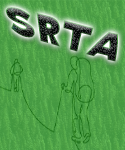
<style>
.page{position:relative;width:125px;height:150px}
.page>*{position:absolute;margin:0}
.t1{font:37.6px "GothamBlack";scale:0.76 1}
</style>
<div class="page">
<p class="t1" style="left:5px;top:7px;width:113px;height:55px">SRTA</p>
</div>
